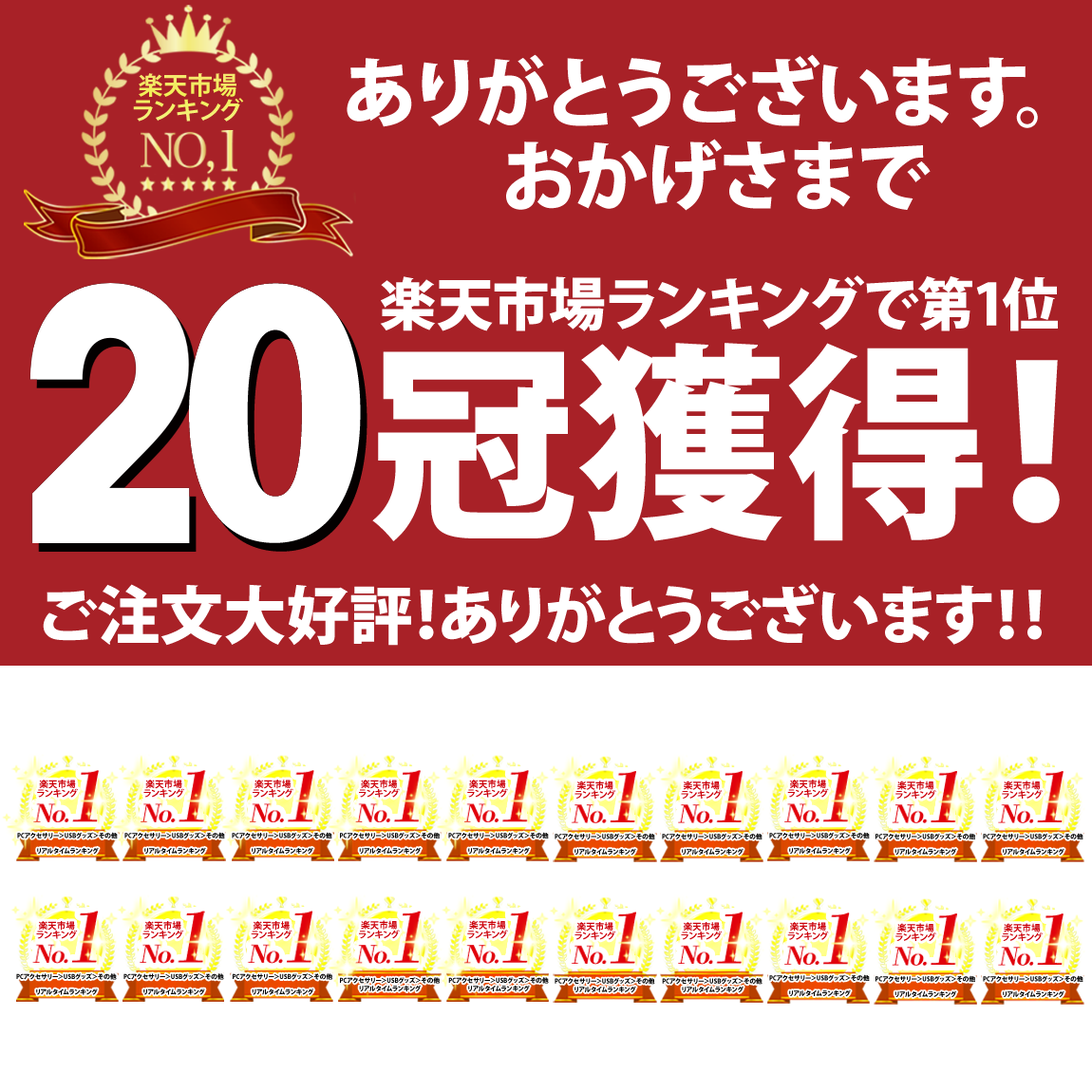
<style>
.page{position:relative;width:1092px;height:1092px;background:#ffffff}
.page>*{position:absolute;margin:0}
.t1{font:75.2px "KozGoPr6N-Heavy";color:#ffffff}
.t2{font:24.8px "KozGoPr6N-Bold";color:#f3ee66}
.t3{font:57px "KozGoPr6N-Heavy";color:#ffffff}
.t4{font:207px "KozGoPr6N-Heavy";color:#ffffff}
.t5{font:63.2px "KozGoPr6N-Heavy";color:#ffffff}
.t6{font:25.1px "DNPShuei4goBStd-Hv";letter-spacing:-0.06em;color:#e1020c;font-style:italic}
.t7{font:69px "DNPShuei4goBStd-Hv";letter-spacing:-0.06em;color:#e1020c;font-style:italic}
.t8{font:9.1px "KozGoPr6N-Bold";color:#cc0009}
.t9{font:6.3px/17.9px "KozGoPr6N-Heavy";color:#000000}
.t10{font:6.3px "KozGoPr6N-Heavy";color:#000000}
</style>
<div class="page">
<p class="t1" style="left:347px;top:54px;width:691px;height:157px;text-align:center">ありがとうございます。<br>おかげさまで</p>
<p class="t2" style="left:133px;top:73px;width:111px;height:49px;text-align:center">楽天市場<br>ランキング</p>
<p class="t3" style="left:380px;top:275px;width:678px;height:56px">楽天市場ランキングで第1位</p>
<p class="t4" style="left:372px;top:343px;width:688px;height:198px">冠獲得！</p>
<p class="t5" style="left:43px;top:583px;width:999px;height:63px">ご注文大好評！ありがとうございます！！</p>
<p class="t6" style="left:33px;top:770px;width:66px;height:52px">No.<span class="t7">1</span></p>
<p class="t6" style="left:141px;top:770px;width:65px;height:52px">No.<span class="t7">1</span></p>
<p class="t6" style="left:250px;top:770px;width:64px;height:52px">No.<span class="t7">1</span></p>
<p class="t6" style="left:355px;top:770px;width:66px;height:52px">No.<span class="t7">1</span></p>
<p class="t6" style="left:464px;top:770px;width:65px;height:52px">No.<span class="t7">1</span></p>
<p class="t6" style="left:571px;top:771px;width:65px;height:52px">No.<span class="t7">1</span></p>
<p class="t6" style="left:678px;top:771px;width:65px;height:52px">No.<span class="t7">1</span></p>
<p class="t6" style="left:784px;top:770px;width:66px;height:52px">No.<span class="t7">1</span></p>
<p class="t6" style="left:892px;top:771px;width:65px;height:52px">No.<span class="t7">1</span></p>
<p class="t6" style="left:998px;top:771px;width:65px;height:52px">No.<span class="t7">1</span></p>
<p class="t8" style="left:37px;top:780px;width:41px;height:18px;text-align:center">楽天市場<br>ランキング</p>
<p class="t8" style="left:143px;top:780px;width:41px;height:18px;text-align:center">楽天市場<br>ランキング</p>
<p class="t8" style="left:253px;top:780px;width:40px;height:18px;text-align:center">楽天市場<br>ランキング</p>
<p class="t8" style="left:359px;top:780px;width:41px;height:18px;text-align:center">楽天市場<br>ランキング</p>
<p class="t8" style="left:467px;top:780px;width:41px;height:18px;text-align:center">楽天市場<br>ランキング</p>
<p class="t8" style="left:574px;top:781px;width:42px;height:18px;text-align:center">楽天市場<br>ランキング</p>
<p class="t8" style="left:681px;top:781px;width:42px;height:18px;text-align:center">楽天市場<br>ランキング</p>
<p class="t8" style="left:787px;top:780px;width:42px;height:18px;text-align:center">楽天市場<br>ランキング</p>
<p class="t8" style="left:895px;top:781px;width:41px;height:18px;text-align:center">楽天市場<br>ランキング</p>
<p class="t8" style="left:1002px;top:781px;width:41px;height:18px;text-align:center">楽天市場<br>ランキング</p>
<p class="t9" style="left:17px;top:832px;width:101px;height:23px;text-align:center">PCアクセサリー＞USBグッズ＞その他<br>リアルタイムランキング</p>
<p class="t9" style="left:124px;top:832px;width:101px;height:23px;text-align:center">PCアクセサリー＞USBグッズ＞その他<br>リアルタイムランキング</p>
<p class="t9" style="left:232px;top:832px;width:100px;height:23px;text-align:center">PCアクセサリー＞USBグッズ＞その他<br>リアルタイムランキング</p>
<p class="t9" style="left:340px;top:832px;width:100px;height:23px;text-align:center">PCアクセサリー＞USBグッズ＞その他<br>リアルタイムランキング</p>
<p class="t9" style="left:448px;top:832px;width:101px;height:23px;text-align:center">PCアクセサリー＞USBグッズ＞その他<br>リアルタイムランキング</p>
<p class="t9" style="left:555px;top:833px;width:100px;height:23px;text-align:center">PCアクセサリー＞USBグッズ＞その他<br>リアルタイムランキング</p>
<p class="t9" style="left:662px;top:833px;width:100px;height:23px;text-align:center">PCアクセサリー＞USBグッズ＞その他<br>リアルタイムランキング</p>
<p class="t9" style="left:769px;top:832px;width:101px;height:23px;text-align:center">PCアクセサリー＞USBグッズ＞その他<br>リアルタイムランキング</p>
<p class="t9" style="left:875px;top:833px;width:100px;height:23px;text-align:center">PCアクセサリー＞USBグッズ＞その他<br>リアルタイムランキング</p>
<p class="t9" style="left:983px;top:833px;width:100px;height:23px;text-align:center">PCアクセサリー＞USBグッズ＞その他<br>リアルタイムランキング</p>
<p class="t6" style="left:32px;top:911px;width:66px;height:53px">No.<span class="t7">1</span></p>
<p class="t6" style="left:140px;top:911px;width:65px;height:53px">No.<span class="t7">1</span></p>
<p class="t6" style="left:247px;top:911px;width:65px;height:53px">No.<span class="t7">1</span></p>
<p class="t6" style="left:355px;top:911px;width:66px;height:53px">No.<span class="t7">1</span></p>
<p class="t6" style="left:464px;top:911px;width:65px;height:53px">No.<span class="t7">1</span></p>
<p class="t6" style="left:571px;top:912px;width:65px;height:53px">No.<span class="t7">1</span></p>
<p class="t6" style="left:678px;top:912px;width:65px;height:53px">No.<span class="t7">1</span></p>
<p class="t6" style="left:784px;top:913px;width:66px;height:52px">No.<span class="t7">1</span></p>
<p class="t6" style="left:892px;top:913px;width:65px;height:53px">No.<span class="t7">1</span></p>
<p class="t6" style="left:998px;top:913px;width:65px;height:53px">No.<span class="t7">1</span></p>
<p class="t8" style="left:36px;top:921px;width:42px;height:18px;text-align:center">楽天市場<br>ランキング</p>
<p class="t8" style="left:142px;top:921px;width:42px;height:18px;text-align:center">楽天市場<br>ランキング</p>
<p class="t8" style="left:251px;top:921px;width:41px;height:18px;text-align:center">楽天市場<br>ランキング</p>
<p class="t8" style="left:359px;top:920px;width:41px;height:19px;text-align:center">楽天市場<br>ランキング</p>
<p class="t8" style="left:467px;top:920px;width:41px;height:19px;text-align:center">楽天市場<br>ランキング</p>
<p class="t8" style="left:574px;top:922px;width:42px;height:18px;text-align:center">楽天市場<br>ランキング</p>
<p class="t8" style="left:681px;top:922px;width:42px;height:18px;text-align:center">楽天市場<br>ランキング</p>
<p class="t8" style="left:787px;top:922px;width:42px;height:18px;text-align:center">楽天市場<br>ランキング</p>
<p class="t8" style="left:895px;top:923px;width:41px;height:18px;text-align:center">楽天市場<br>ランキング</p>
<p class="t8" style="left:1002px;top:923px;width:41px;height:18px;text-align:center">楽天市場<br>ランキング</p>
<p class="t9" style="left:16px;top:973px;width:101px;height:22px;text-align:center">PCアクセサリー＞USBグッズ＞その他<br>リアルタイムランキング</p>
<p class="t9" style="left:123px;top:973px;width:101px;height:22px;text-align:center">PCアクセサリー＞USBグッズ＞その他<br>リアルタイムランキング</p>
<p class="t9" style="left:233px;top:973px;width:99px;height:22px;text-align:center">PCアクセサリー＞USBグッズ＞その他<br>リアルタイムランキング</p>
<p class="t10" style="left:340px;top:977px;width:100px;height:15px;text-align:center">PCアクセサリー＞USBグッズ＞その他<br>リアルタイムランキング</p>
<p class="t10" style="left:448px;top:977px;width:101px;height:15px;text-align:center">PCアクセサリー＞USBグッズ＞その他<br>リアルタイムランキング</p>
<p class="t10" style="left:555px;top:977px;width:100px;height:16px;text-align:center">PCアクセサリー＞USBグッズ＞その他<br>リアルタイムランキング</p>
<p class="t10" style="left:662px;top:977px;width:100px;height:16px;text-align:center">PCアクセサリー＞USBグッズ＞その他<br>リアルタイムランキング</p>
<p class="t9" style="left:769px;top:974px;width:101px;height:23px;text-align:center">PCアクセサリー＞USBグッズ＞その他<br>リアルタイムランキング</p>
<p class="t9" style="left:875px;top:975px;width:100px;height:23px;text-align:center">PCアクセサリー＞USBグッズ＞その他<br>リアルタイムランキング</p>
<p class="t9" style="left:983px;top:975px;width:100px;height:23px;text-align:center">PCアクセサリー＞USBグッズ＞その他<br>リアルタイムランキング</p>
</div>
